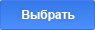
<style>
.page{position:relative;width:95px;height:30px}
.page>*{position:absolute;margin:0}
.t1{font:12px "Arial-BoldMT";color:#ffffff}
</style>
<div class="page">
<p class="t1" style="left:22px;top:10px;width:53px;height:11px">Выбрать</p>
</div>
